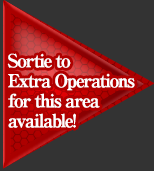
<style>
.page{position:relative;width:154px;height:171px;background:#333333}
.page>*{position:absolute;margin:0}
.t1{font:18px/20px "RyuminPro-ExBold";letter-spacing:-0.08em;color:#ffffff}
</style>
<div class="page">
<p class="t1" style="left:7px;top:53px;width:128px;height:75px">Sortie to<br>Extra Operations<br>for this area<br>available!</p>
</div>
